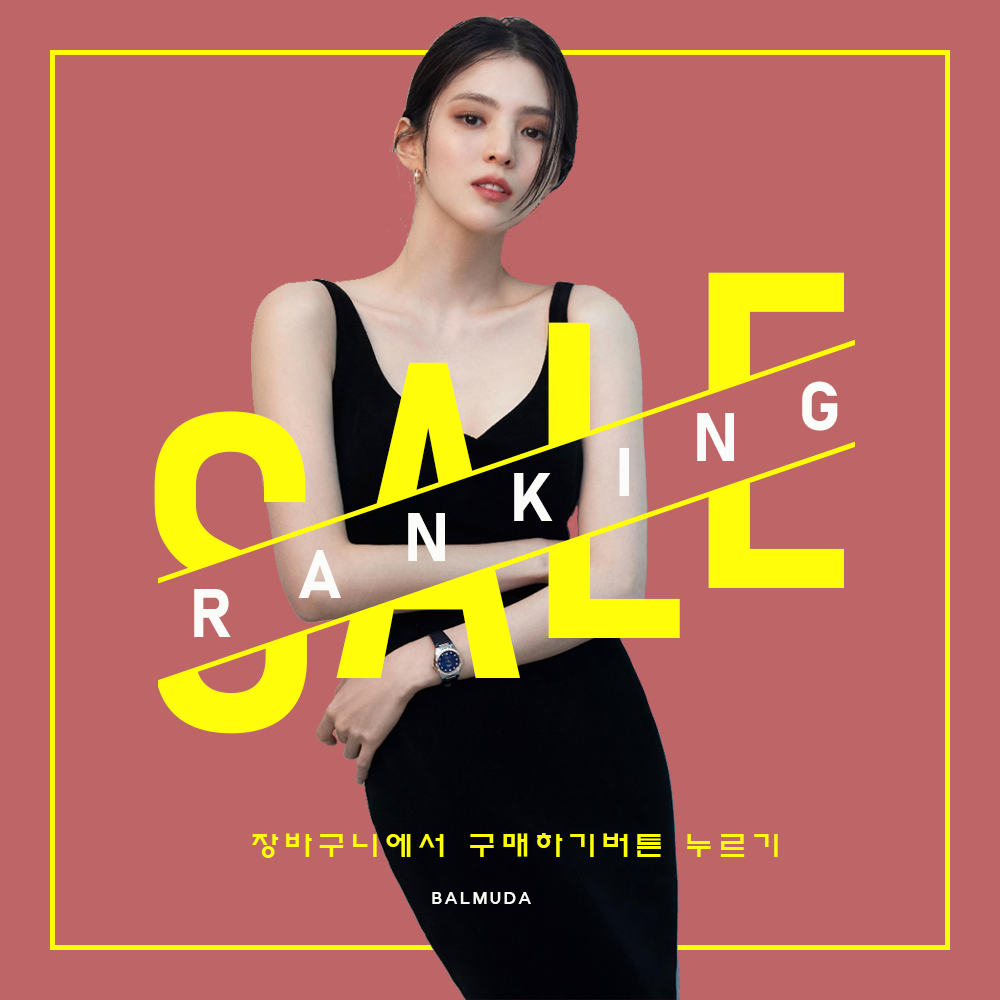
<style>
.page{position:relative;width:1000px;height:1000px;background:#be6567}
.page>*{position:absolute;margin:0}
.t1{font:444.3px "Bahnschrift-Condensed";color:#fffd0a;text-transform:uppercase}
.t2{font:67.6px "Bahnschrift-Bold";letter-spacing:0.2em;color:#fbfbf9;text-transform:uppercase}
.t3{font:27.9px "ExpoM-HM";letter-spacing:0.2em;color:#fffd0a;text-transform:uppercase}
.t4{font:15px "ExpoM-HM";letter-spacing:0.2em;color:#f9f9f4;text-transform:uppercase}
</style>
<div class="page">
<p class="t1" style="left:708px;top:272px;width:136px;height:316px">e</p>
<p class="t1" style="left:548px;top:322px;width:132px;height:316px">l</p>
<p class="t1" style="left:336px;top:362px;width:184px;height:316px">a</p>
<p class="t2" style="left:802px;top:381px;width:36px;height:50px">g</p>
<p class="t1" style="left:154px;top:411px;width:153px;height:323px">s</p>
<p class="t2" style="left:697px;top:413px;width:37px;height:48px">n</p>
<p class="t2" style="left:619px;top:448px;width:10px;height:48px">i</p>
<p class="t2" style="left:514px;top:473px;width:39px;height:48px">k</p>
<p class="t2" style="left:408px;top:513px;width:37px;height:48px">n</p>
<p class="t2" style="left:298px;top:550px;width:43px;height:48px">a</p>
<p class="t2" style="left:194px;top:589px;width:37px;height:48px">r</p>
<p class="t3" style="left:252px;top:833px;width:526px;height:25px">장바구니에서 구매하기버튼 누르기</p>
<p class="t4" style="left:432px;top:892px;width:99px;height:12px">balmuda</p>
</div>
